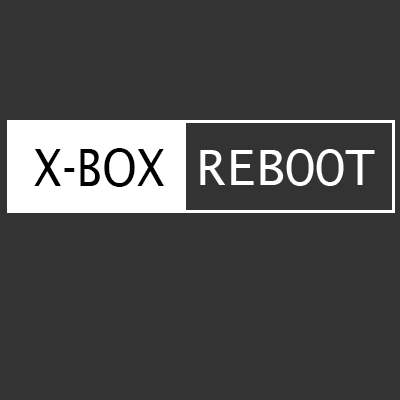
<style>
.page{position:relative;width:400px;height:400px;background:#333333}
.page>*{position:absolute;margin:0}
.t1{font:51px "LucidaSans";color:#000000;text-transform:uppercase;scale:0.88 1}
.t2{font:51px "LucidaSansUnicode";color:#000000;text-transform:uppercase;scale:0.88 1}
.t3{font:49.5px "LucidaSans-Typewriter";color:#ffffff;text-transform:uppercase}
</style>
<div class="page">
<p class="t1" style="left:34px;top:148px;width:130px;height:39px"><span class="t2">x</span>-box</p>
<p class="t3" style="left:200px;top:149px;width:175px;height:37px">Reboot</p>
</div>
